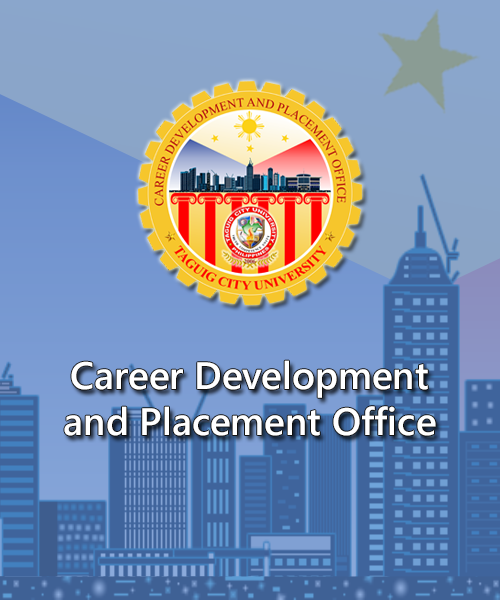
<style>
.page{position:relative;width:500px;height:600px}
.page>*{position:absolute;margin:0}
.t1{font:9.2px "SegoeUI-Semibold";color:#ffffff}
</style>
<div class="page">
<p class="t1" style="left:64px;top:360px;width:372px;height:76px;text-align:center">Career Development<br>and Placement Office</p>
</div>
